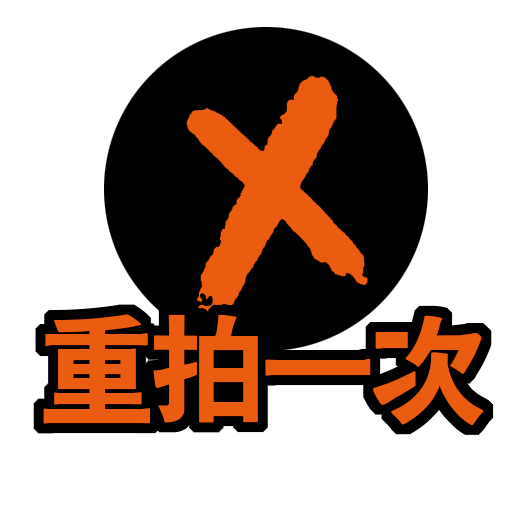
<style>
.page{position:relative;width:512px;height:512px;background:#ffffff}
.page>*{position:absolute;margin:0}
.t1{font:200px "DFHei-XB-WIN-BF";letter-spacing:-0.05em;color:#ea5c10}
</style>
<div class="page">
<p class="t1" style="left:43px;top:314px;width:441px;height:111px">重拍一次</p>
</div>
